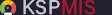
<style>
.page{position:relative;width:112px;height:15px;background:#201f2b}
.page>*{position:absolute;margin:0}
.t1{font:19.9px "AcuminConcept-Regular";letter-spacing:0.04em;color:#c8c9d3}
.t2{font:19.9px "AcuminConcept-Regular";letter-spacing:0.04em;color:#b1162f}
</style>
<div class="page">
<p class="t1" style="left:23px;top:0px;width:72px;height:15px">KSP<span class="t2">MIS</span></p>
</div>
